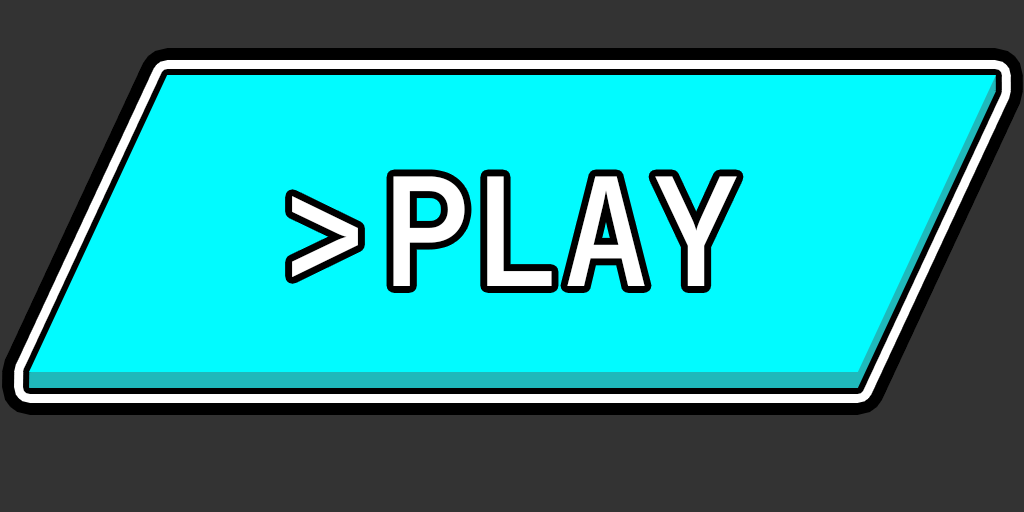
<style>
.page{position:relative;width:1024px;height:512px;background:#01fbff}
.page>*{position:absolute;margin:0}
.t1{font:150px "JetBrainsMonoRoman-Medium";color:#ffffff}
</style>
<div class="page">
<p class="t1" style="left:292px;top:176px;width:445px;height:110px">PLAY</p>
</div>
